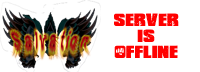
<style>
.page{position:relative;width:200px;height:72px;background:#ffffff}
.page>*{position:absolute;margin:0}
.t1{font:20px/7.9px "Shaun-of-the-Dead-Regular";color:#ff0000}
</style>
<div class="page">
<p class="t1" style="left:114px;top:13px;width:65px;height:45px;text-align:center">Server <br><br>is<br> <br>OFFline</p>
</div>
